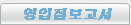
<style>
.page{position:relative;width:131px;height:25px}
.page>*{position:absolute;margin:0}
.t1{font:24px "(ÇÑ)¹®È­¹æ¼Û";color:#72aed4;text-transform:uppercase;font-weight:bold}
</style>
<div class="page">
<p class="t1" style="left:24px;top:8px;width:88px;height:12px">영업점보고서</p>
</div>
